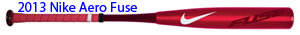
<style>
.page{position:relative;width:300px;height:35px;background:#ffffff}
.page>*{position:absolute;margin:0}
.t1{font:14px "MyriadPro-Regular";color:#0000ff}
</style>
<div class="page">
<p class="t1" style="left:18px;top:2px;width:119px;height:10px">2013 Nike Aero Fuse</p>
</div>
